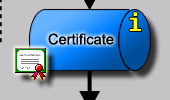
<style>
.page{position:relative;width:170px;height:100px;background:#c6c3c6}
.page>*{position:absolute;margin:0}
.t1{font:24px "Fixedsys";color:#ffff00}
.t2{font:14.7px "ArialMT";color:#000000}
</style>
<div class="page">
<p class="t1" style="left:129px;top:12px;width:12px;height:19px">i</p>
<p class="t2" style="left:48px;top:33px;width:66px;height:12px">Certificate</p>
</div>
